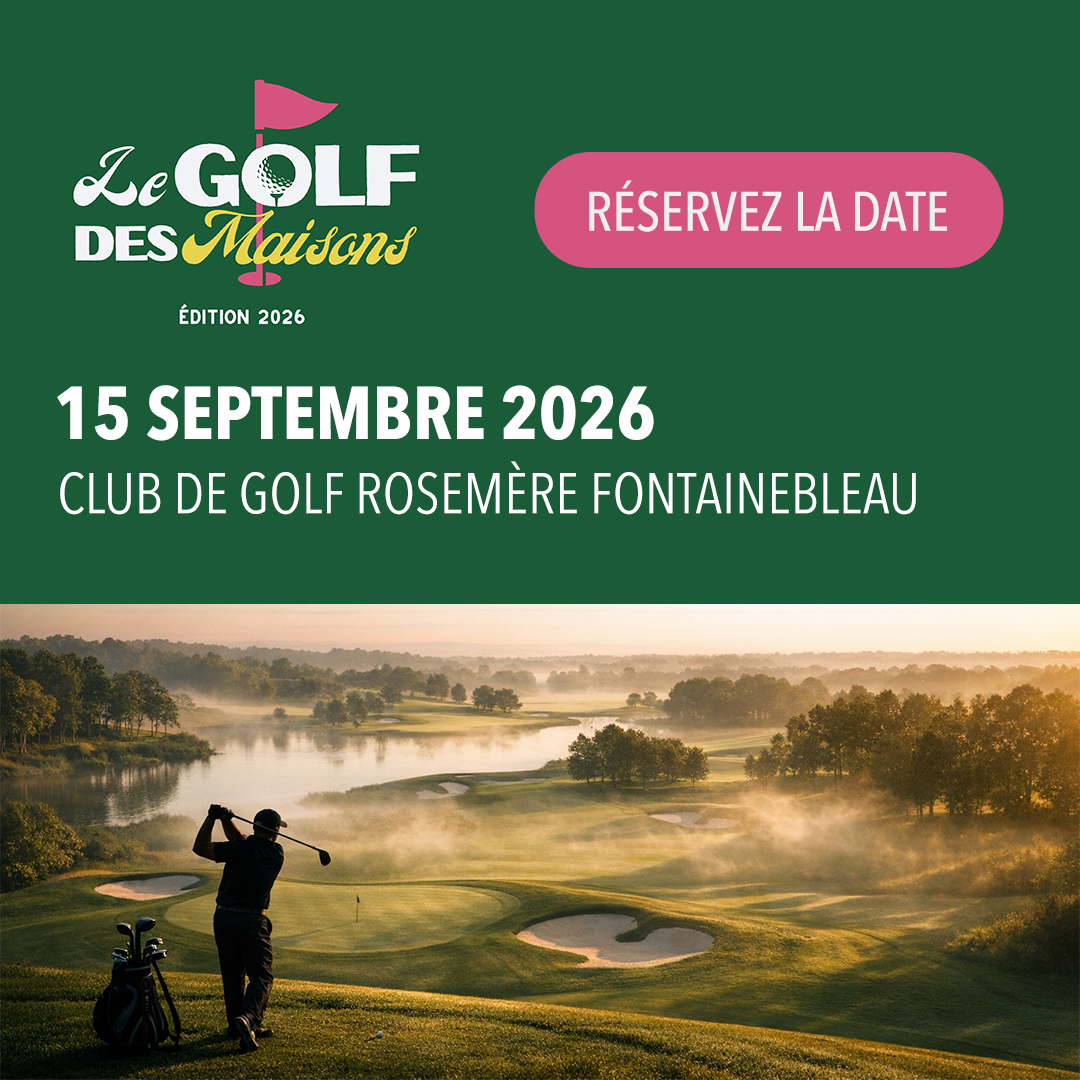
<style>
.page{position:relative;width:1080px;height:1080px;background:#1a5c38}
.page>*{position:absolute;margin:0}
.t1{font:55.2px "AvenirNextCondensed-Medium";color:#efefef}
.t2{font:73.9px "AvenirNextCondensed-Bold";color:#ffffff}
.t3{font:57.1px "AvenirNextCondensed-Regular";color:#ffffff}
</style>
<div class="page">
<p class="t1" style="left:589px;top:180px;width:358px;height:52px">RÉSERVEZ LA DATE</p>
<p class="t2" style="left:57px;top:385px;width:597px;height:56px">15 SEPTEMBRE 2026</p>
<p class="t3" style="left:60px;top:461px;width:856px;height:54px">CLUB DE GOLF ROSEMÈRE FONTAINEBLEAU</p>
</div>
